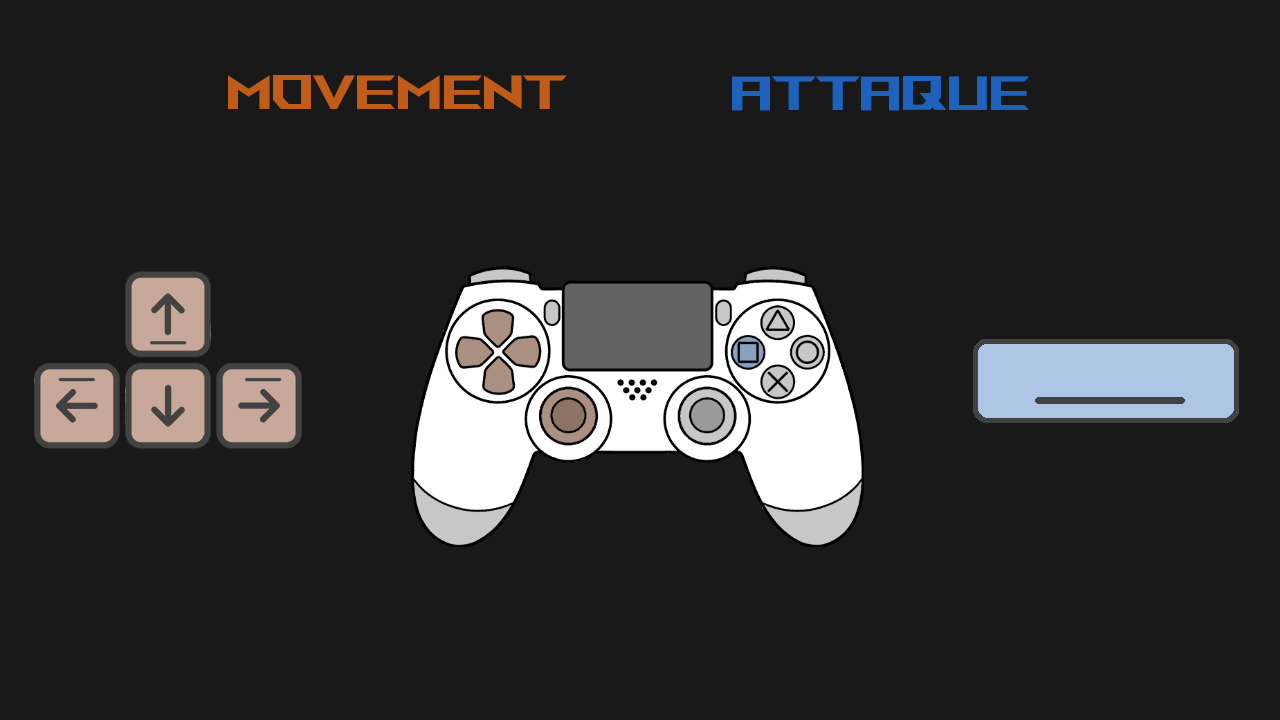
<style>
.page{position:relative;width:1280px;height:720px;background:#191919}
.page>*{position:absolute;margin:0}
.t1{font:48px "ROGFonts-Regular";color:#bf5c19}
.t2{font:48px "ROGFonts-Regular";color:#1e62bd}
</style>
<div class="page">
<p class="t1" style="left:228px;top:75px;width:339px;height:34px">Movement</p>
<p class="t2" style="left:732px;top:76px;width:297px;height:35px">Attaque</p>
</div>
